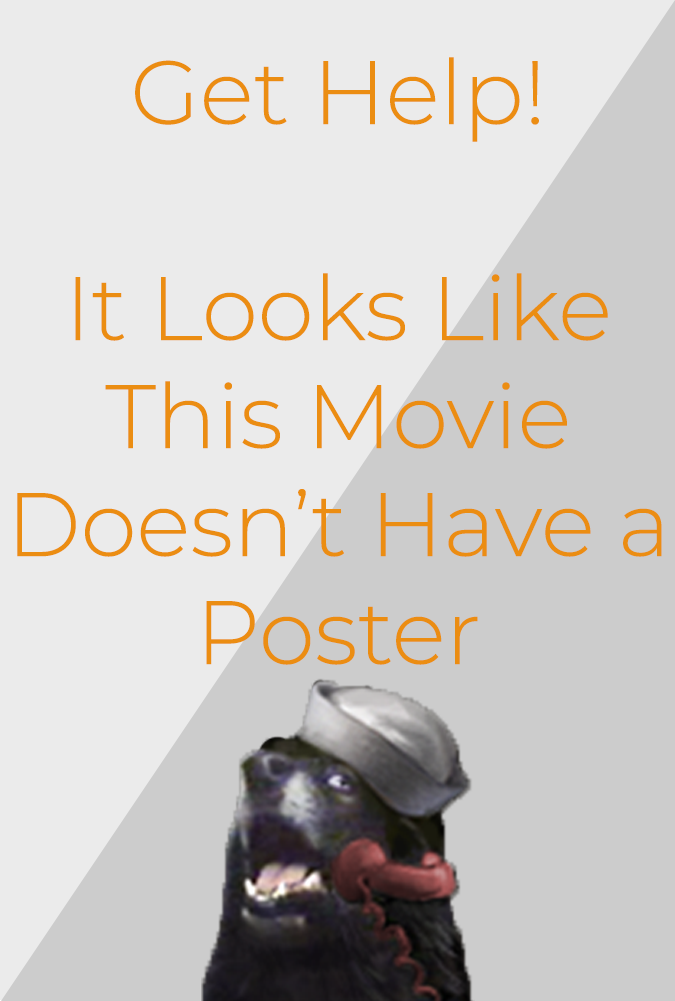
<style>
.page{position:relative;width:675px;height:1001px;background:#ebebeb}
.page>*{position:absolute;margin:0}
.t1{font:90px "Montserrat-Light";color:#eb8d12}
</style>
<div class="page">
<p class="t1" style="left:17px;top:57px;width:645px;height:608px;text-align:center">Get Help!<br><br>It Looks Like This Movie Doesn’t Have a Poster</p>
</div>
